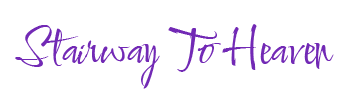
<style>
.page{position:relative;width:359px;height:100px;background:#ffffff}
.page>*{position:absolute;margin:0}
.t1{font:50px "Comforter-Regular";color:#7229b5}
</style>
<div class="page">
<p class="t1" style="left:15px;top:24px;width:319px;height:65px">Stairway To Heaven</p>
</div>
